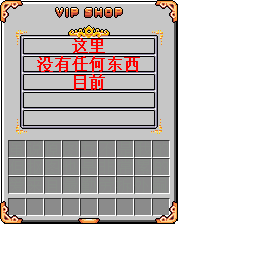
<style>
.page{position:relative;width:256px;height:256px;background:#ffffff}
.page>*{position:absolute;margin:0}
.t1{font:16px/18px "MinecraftAE-Pixel";letter-spacing:0.06em;color:#ff0000;font-weight:bold}
</style>
<div class="page">
<p class="t1" style="left:37px;top:38px;width:103px;height:52px;text-align:center">这里<br>没有任何东西<br>目前</p>
</div>
